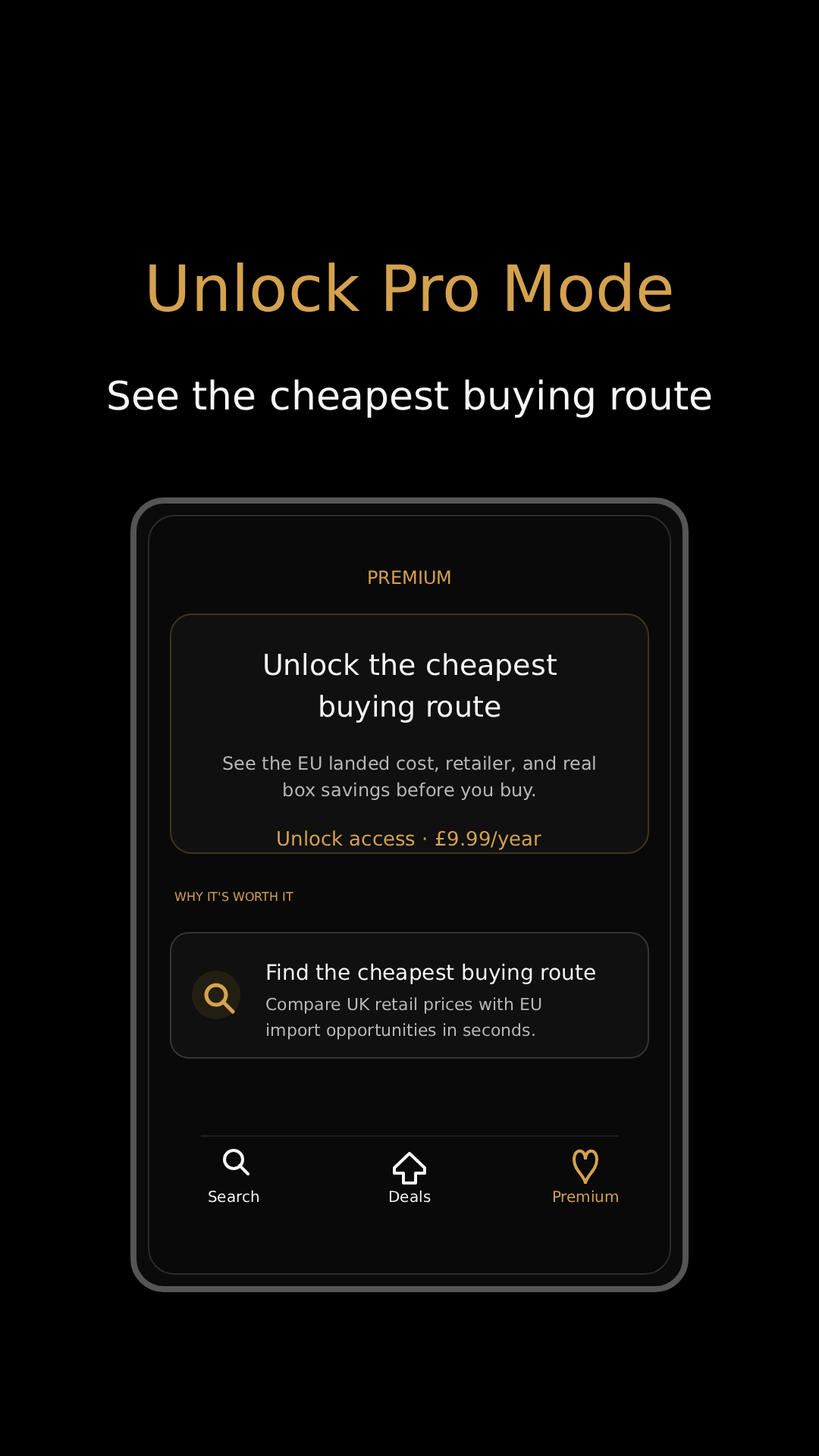
<style>
.page{position:relative;width:819px;height:1456px;background:#000000}
.page>*{position:absolute;margin:0}
.t1{font:63.7px "Arial";color:#d4a24f}
.t2{font:39.4px "Arial";color:#f6f6f6}
.t3{font:18.2px "Arial";color:#d4a24f}
.t4{font:28.8px "Arial";color:#f6f6f6}
.t5{font:18.2px "Arial";color:#b8b8b8}
.t6{font:19.7px "Arial";color:#d4a24f}
.t7{font:12.1px "Arial";color:#d4a24f}
.t8{font:21.2px "Arial";color:#f6f6f6}
.t9{font:16.7px "Arial";color:#b8b8b8}
.t10{font:15.2px "Arial";color:#f6f6f6}
.t11{font:15.2px "Arial";color:#d4a24f}
</style>
<div class="page">
<p class="t1" style="left:149px;top:262px;width:523px;height:50px">Unlock Pro Mode</p>
<p class="t2" style="left:108px;top:379px;width:603px;height:39px">See the cheapest buying route</p>
<p class="t3" style="left:369px;top:570px;width:81px;height:15px">PREMIUM</p>
<p class="t4" style="left:265px;top:653px;width:292px;height:28px">Unlock the cheapest</p>
<p class="t4" style="left:320px;top:695px;width:180px;height:28px">buying route</p>
<p class="t5" style="left:223px;top:755px;width:372px;height:17px">See the EU landed cost, retailer, and real</p>
<p class="t5" style="left:284px;top:782px;width:251px;height:18px">box savings before you buy.</p>
<p class="t6" style="left:278px;top:830px;width:263px;height:20px">Unlock access · £9.99/year</p>
<p class="t7" style="left:174px;top:892px;width:119px;height:10px">WHY IT'S WORTH IT</p>
<p class="t8" style="left:267px;top:963px;width:328px;height:21px">Find the cheapest buying route</p>
<p class="t9" style="left:266px;top:997px;width:275px;height:17px">Compare UK retail prices with EU</p>
<p class="t9" style="left:267px;top:1023px;width:268px;height:17px">import opportunities in seconds.</p>
<p class="t10" style="left:209px;top:1190px;width:50px;height:13px">Search</p>
<p class="t10" style="left:389px;top:1190px;width:42px;height:13px">Deals</p>
<p class="t11" style="left:553px;top:1190px;width:65px;height:13px">Premium</p>
</div>
